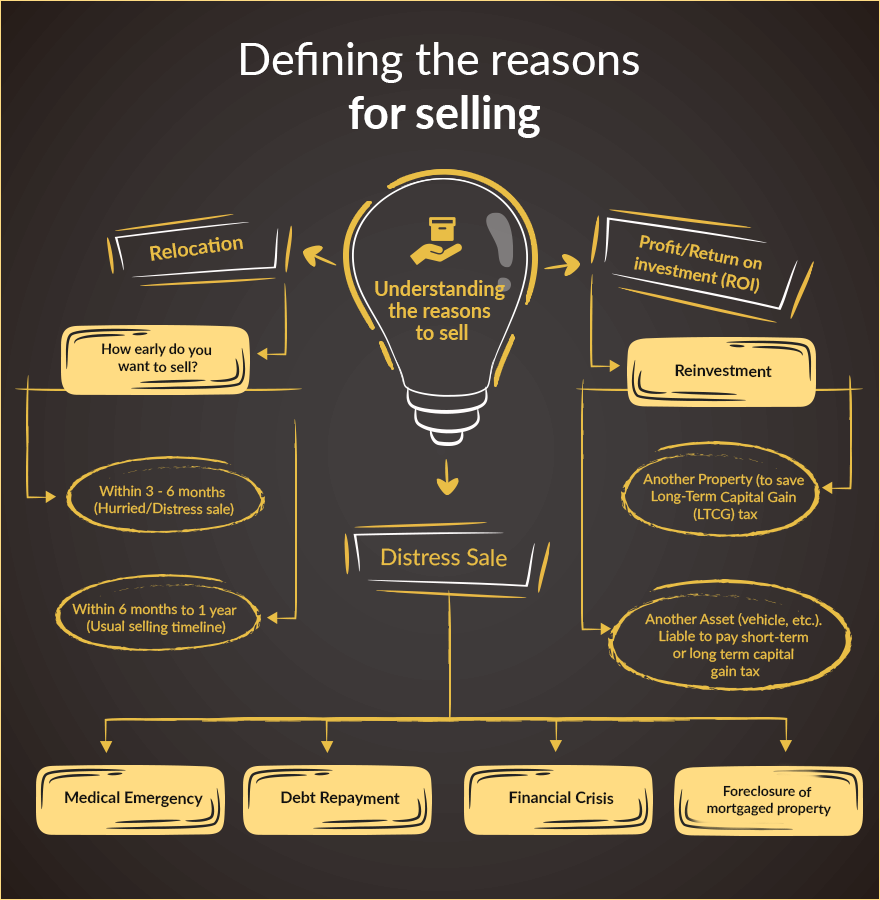
<style>
.page{position:relative;width:880px;height:900px}
.page>*{position:absolute;margin:0}
.t1{font:44.6px "Lato-Regular";color:#ffffff}
.t2{font:44.6px "Lato-Bold";color:#ffffff}
.t3{font:20px "Lato-Bold";color:#e9be46}
.t4{font:17px/22px "Lato-Bold";color:#e9be46}
.t5{font:20px/22px "Lato-Bold";color:#e9be46}
.t6{font:14.3px "Lato-Bold";color:#111111}
.t7{font:16px "Lato-Bold";color:#111111}
.t8{font:14.3px "Lato-Regular";color:#e9be46}
.t9{font:22.9px "Lato-Regular";color:#e9be46}
.t10{font:14px "Lato-Bold";color:#111111}
</style>
<div class="page">
<p class="t1" style="left:241px;top:42px;width:398px;height:96px;text-align:center">Defining the reasons <br><span class="t2">for selling</span></p>
<p class="t3" style="left:150px;top:237px;width:93px;height:24px;rotate:-8deg">Relocation</p>
<p class="t4" style="left:634px;top:235px;width:128px;height:59px;text-align:center;rotate:11deg">Profit/Return on <br>investment (ROI)</p>
<p class="t5" style="left:375px;top:280px;width:130px;height:60px;text-align:center">Understanding <br>the reasons <br>to sell</p>
<p class="t6" style="left:102px;top:343px;width:110px;height:30px;text-align:center">How early do you <br>want to sell?</p>
<p class="t7" style="left:675px;top:364px;width:97px;height:14px">Reinvestment</p>
<p class="t8" style="left:643px;top:473px;width:161px;height:49px;text-align:center">Another Property (to save <br>Long-Term Capital Gain <br>(LTCG) tax</p>
<p class="t8" style="left:94px;top:485px;width:140px;height:31px;text-align:center">Within 3 - 6 months <br>(Hurried/Distress sale)</p>
<p class="t9" style="left:381px;top:548px;width:126px;height:19px">Distress Sale</p>
<p class="t8" style="left:72px;top:603px;width:165px;height:32px;text-align:center">Within 6 months to 1 year <br>(Usual selling timeline)</p>
<p class="t8" style="left:645px;top:613px;width:177px;height:66px;text-align:center">Another Asset (vehicle, etc.). <br>Liable to pay short-term <br>or long term capital <br>gain tax</p>
<p class="t10" style="left:707px;top:785px;width:124px;height:32px;text-align:center">Foreclosure of <br>mortgaged property</p>
<p class="t7" style="left:65px;top:791px;width:138px;height:17px">Medical Emergency</p>
<p class="t7" style="left:281px;top:791px;width:119px;height:15px">Debt Repayment</p>
<p class="t7" style="left:509px;top:791px;width:105px;height:14px">Financial Crisis</p>
</div>
